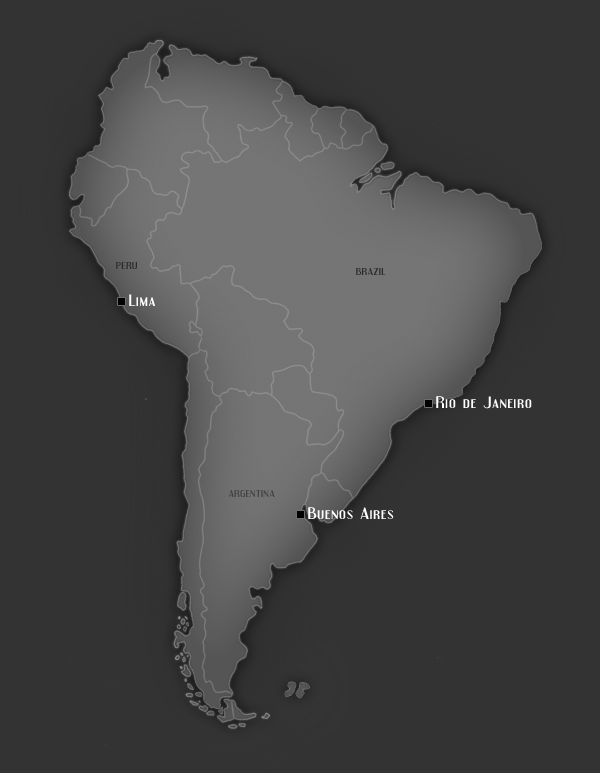
<style>
.page{position:relative;width:600px;height:773px;background:#333333}
.page>*{position:absolute;margin:0}
.t1{font:8.8px "Engebrechtre";letter-spacing:0.05em;color:#424242;scale:1.25 1}
.t2{font:14.4px "Engebrechtre";letter-spacing:0.05em;color:#ffffff;scale:1.25 1}
</style>
<div class="page">
<p class="t1" style="left:116px;top:262px;width:21px;height:7px">PERU</p>
<p class="t1" style="left:356px;top:268px;width:30px;height:7px">BRAZIL</p>
<p class="t2" style="left:129px;top:294px;width:26px;height:12px">Lima</p>
<p class="t2" style="left:436px;top:396px;width:96px;height:13px">Rio de Janeiro</p>
<p class="t1" style="left:228px;top:490px;width:47px;height:7px">ARGENTINA</p>
<p class="t2" style="left:308px;top:507px;width:86px;height:12px">Buenos Aires</p>
</div>
